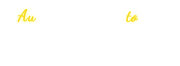
<style>
.page{position:relative;width:180px;height:66px;background:#ffffff}
.page>*{position:absolute;margin:0}
.t1{font:16px "DancingScript-Regular";color:#f9d920;font-weight:bold}
</style>
<div class="page">
<p class="t1" style="left:17px;top:9px;width:19px;height:14px">Au</p>
<p class="t1" style="left:126px;top:11px;width:12px;height:11px">to</p>
</div>
